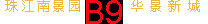
<style>
.page{position:relative;width:208px;height:24px;background:#ffffff}
.page>*{position:absolute;margin:0}
.t1{font:13px "MicrosoftYaHei";letter-spacing:0.21em;color:#f1b73b}
.t2{font:13px "MicrosoftYaHei";letter-spacing:0.45em;color:#f1b73b}
</style>
<div class="page">
<p class="t1" style="left:5px;top:0px;width:75px;height:12px">珠江南景园</p>
<p class="t2" style="left:131px;top:0px;width:69px;height:12px">华景新城</p>
</div>
